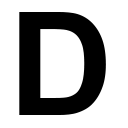
<style>
.page{position:relative;width:128px;height:128px;background:#ffffff}
.page>*{position:absolute;margin:0}
.t1{font:144px "Arial-BoldMT";color:#000000}
</style>
<div class="page">
<p class="t1" style="left:19px;top:12px;width:87px;height:103px">D</p>
</div>
